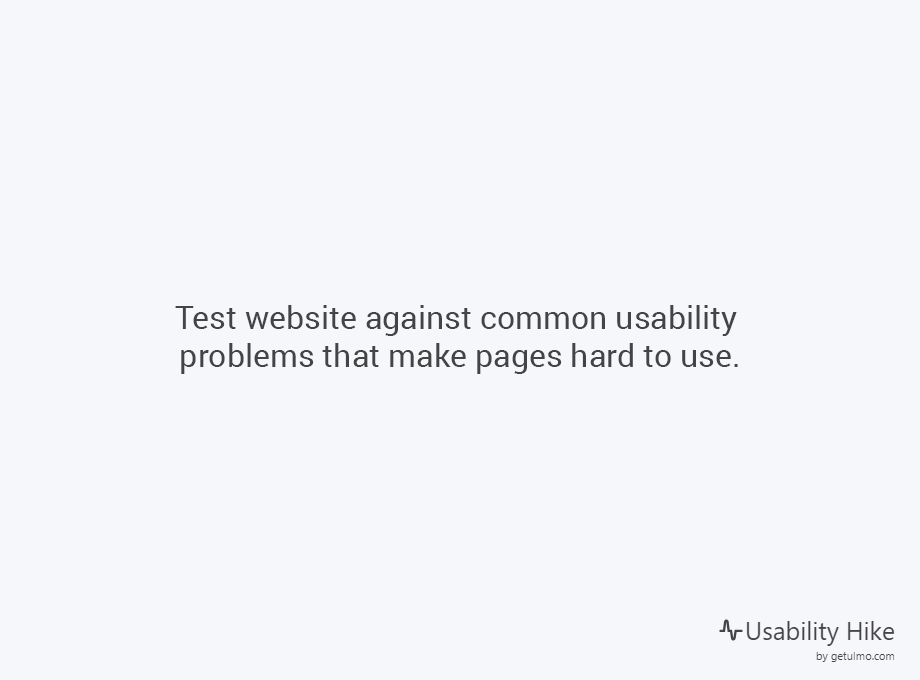
<style>
.page{position:relative;width:920px;height:680px;background:#f6f7fb}
.page>*{position:absolute;margin:0}
.t1{font:32px "Roboto-Regular";color:#444444}
</style>
<div class="page">
<p class="t1" style="left:175px;top:305px;width:563px;height:69px;text-align:center">Test website against common usability <br>problems that make pages hard to use.</p>
</div>
